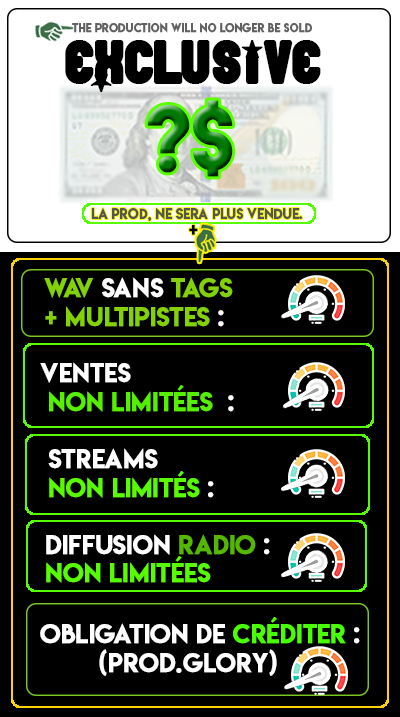
<style>
.page{position:relative;width:400px;height:717px;background:#000000}
.page>*{position:absolute;margin:0}
.t1{font:10.8px "LemonMilk";color:#616161;text-transform:uppercase;font-weight:bold}
.t2{font:65.4px "Pornstar";color:#000000;text-transform:uppercase;font-weight:bold}
.t3{font:80.4px "LemonMilk";text-transform:uppercase;font-weight:bold}
.t4{font:13.3px "LemonMilk";color:#545454;text-transform:uppercase;font-weight:bold;scale:0.97 1}
.t5{font:18px "LemonMilk";color:#000000;text-transform:uppercase;font-weight:bold}
.t6{font:24px "LemonMilk";color:#83d107;text-transform:uppercase;font-weight:bold}
.t7{font:24px "LemonMilk";color:#ffffff;text-transform:uppercase;font-weight:bold}
.t8{font:24px "LemonMilk";color:#55f000;text-transform:uppercase;font-weight:bold}
.t9{font:24px "LemonMilk";color:#58fb00;text-transform:uppercase;font-weight:bold}
.t10{font:24px "LemonMilk";color:#58fc00;text-transform:uppercase;font-weight:bold}
.t11{font:24px "LemonMilk";color:#56b700;text-transform:uppercase;font-weight:bold}
.t12{font:24px "LemonMilk";color:#4aff03;text-transform:uppercase;font-weight:bold}
</style>
<div class="page">
<p class="t1" style="left:72px;top:22px;width:240px;height:11px">the production will no longer be sold</p>
<p class="t2" style="left:65px;top:40px;width:256px;height:52px">exclusive</p>
<p class="t3" style="left:147px;top:100px;width:86px;height:77px">?$</p>
<p class="t4" style="left:91px;top:207px;width:212px;height:14px">la prod, ne sera plus vendue.</p>
<p class="t5" style="left:189px;top:225px;width:9px;height:10px">+</p>
<p class="t6" style="left:44px;top:277px;width:189px;height:50px">wav<span class="t7"> sans </span>tags <br>+ multipistes<span class="t7"> :</span></p>
<p class="t8" style="left:40px;top:362px;width:194px;height:50px"><span class="t7">ventes<br></span> non limitées<span class="t7">  :</span></p>
<p class="t9" style="left:48px;top:448px;width:166px;height:50px"><span class="t7">streams <br></span>non limités<span class="t7"> :</span></p>
<p class="t10" style="left:46px;top:534px;width:224px;height:49px"><span class="t7">diffusion </span><span class="t11">radio</span><span class="t7"> : <br></span>non limitées</p>
<p class="t7" style="left:40px;top:617px;width:320px;height:59px">obligation de <span class="t12">créditer</span> :<br>        (prod.glory)</p>
</div>
